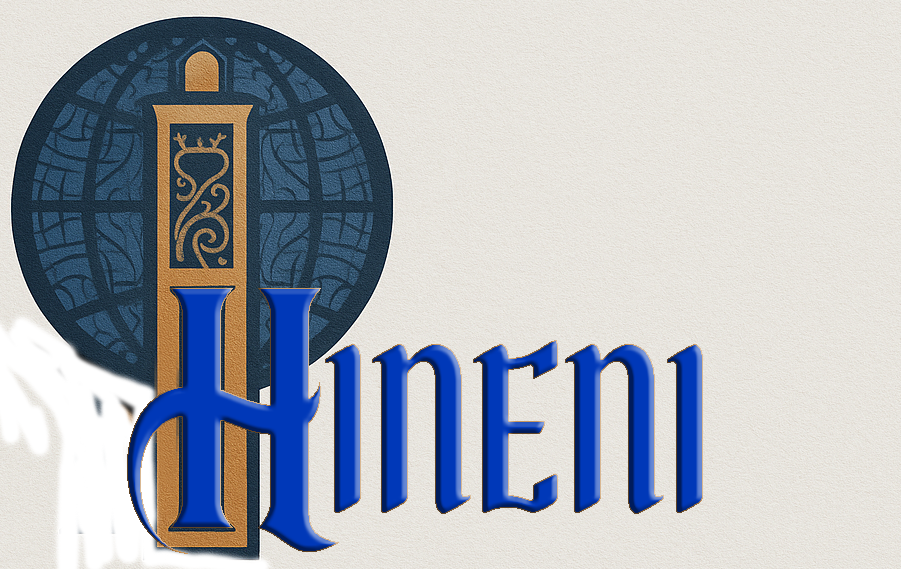
<style>
.page{position:relative;width:901px;height:569px}
.page>*{position:absolute;margin:0}
.t1{font:307.1px "Solander-Demo";letter-spacing:-0.025em}
.t2{font:307.1px "Firlest";letter-spacing:-0.025em}
</style>
<div class="page">
<p class="t1" style="left:127px;top:288px;width:576px;height:266px"><span class="t2">H</span>ineni</p>
</div>
